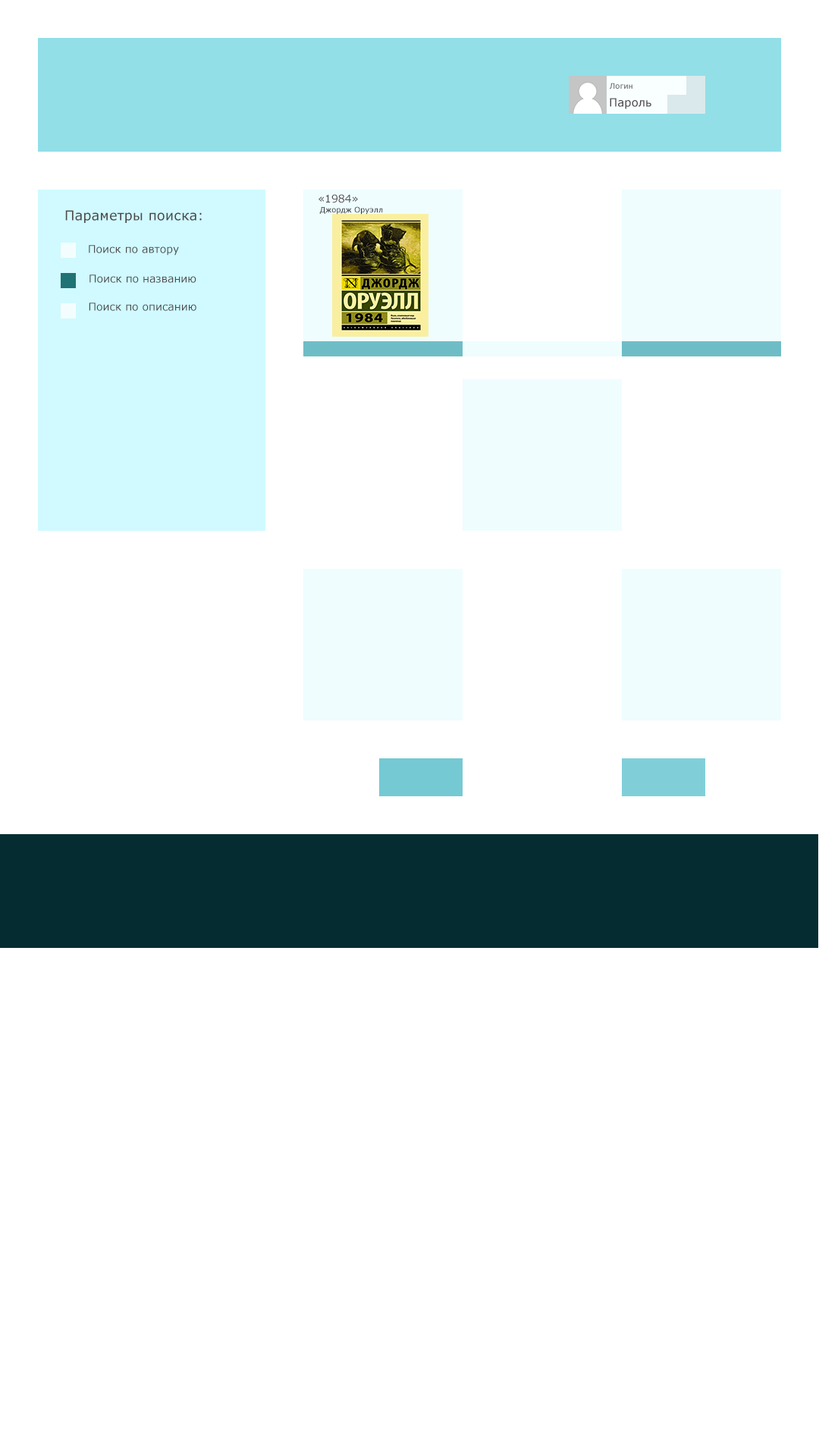
<style>
.page{position:relative;width:819px;height:1456px;background:#ffffff}
.page>*{position:absolute;margin:0}
.t1{font:7.6px "Verdana"}
.t2{font:11.4px "Verdana";color:#4e494c}
.t3{font:10.6px "Verdana";color:#4e494c}
.t4{font:7.6px "Verdana";color:#333032}
.t5{font:13.6px "Verdana";color:#4e494c}
</style>
<div class="page">
<p class="t1" style="left:610px;top:83px;width:22px;height:6px">Логин</p>
<p class="t2" style="left:610px;top:98px;width:41px;height:11px">Пароль</p>
<p class="t3" style="left:318px;top:194px;width:40px;height:9px">«1984»</p>
<p class="t4" style="left:319px;top:206px;width:64px;height:9px">Джордж Оруэлл</p>
<p class="t5" style="left:65px;top:210px;width:137px;height:13px">Параметры поиска:</p>
<p class="t3" style="left:89px;top:245px;width:90px;height:11px">Поиск по автору</p>
<p class="t3" style="left:89px;top:275px;width:107px;height:8px">Поиск по названию</p>
<p class="t3" style="left:89px;top:303px;width:107px;height:8px">Поиск по описанию</p>
</div>
